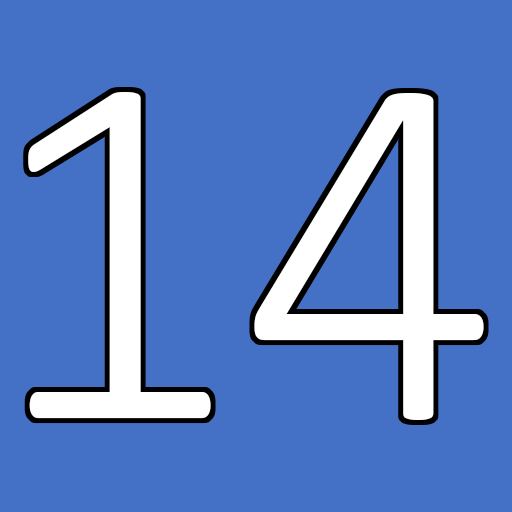
<style>
.page{position:relative;width:512px;height:512px;background:#4471c5}
.page>*{position:absolute;margin:0}
.t1{font:511.5px "Calibri-Light";color:#ffffff}
</style>
<div class="page">
<p class="t1" style="left:28px;top:92px;width:456px;height:328px">14</p>
</div>
